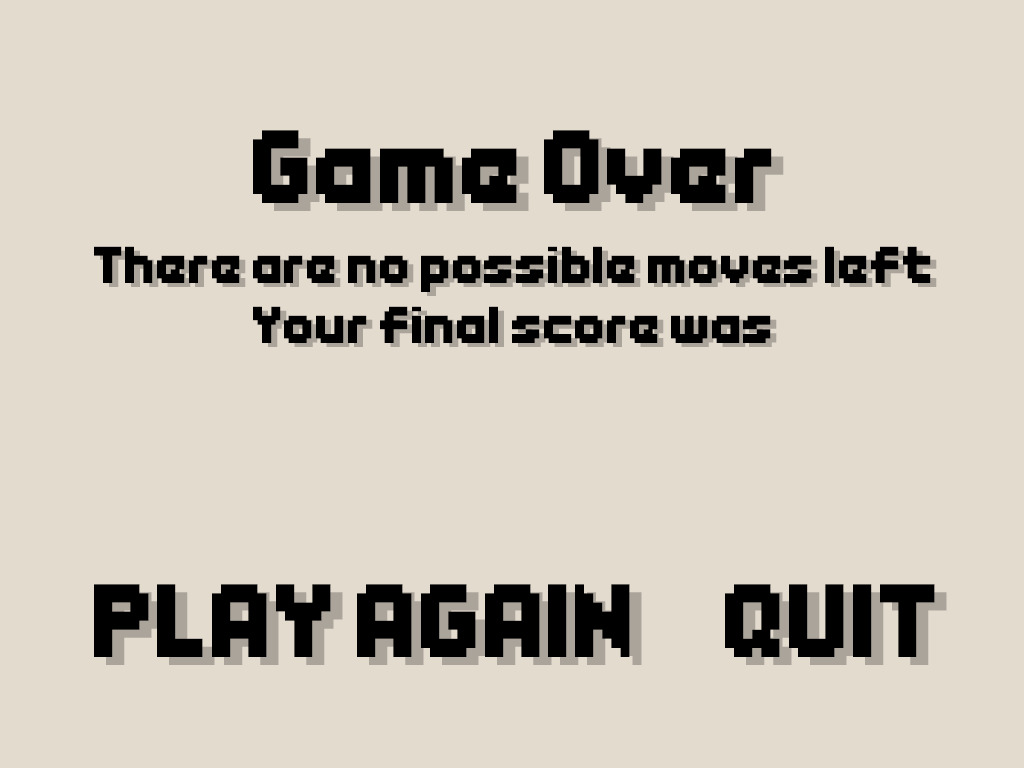
<style>
.page{position:relative;width:1024px;height:768px;background:#e4dbcf}
.page>*{position:absolute;margin:0}
.t1{font:100px "Endless-Boss-Battle";color:#000000}
.t2{font:12px "Endless-Boss-Battle";color:#000000}
</style>
<div class="page">
<p class="t1" style="left:253px;top:130px;width:519px;height:73px">Game Over</p>
<p class="t2" style="left:94px;top:246px;width:837px;height:97px;text-align:center">There are no possible moves left<br>Your final score was</p>
<p class="t1" style="left:94px;top:584px;width:536px;height:73px">PLAY AGAIN</p>
<p class="t1" style="left:725px;top:584px;width:210px;height:73px">QUIT</p>
</div>
